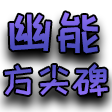
<style>
.page{position:relative;width:112px;height:112px}
.page>*{position:absolute;margin:0}
.t1{font:36px "HappyZcool-2016"}
.t2{font:48px "HappyZcool-2016"}
</style>
<div class="page">
<p class="t1" style="left:4px;top:12px;width:104px;height:84px;text-align:center"><span class="t2">幽能<br></span>方尖碑</p>
</div>
